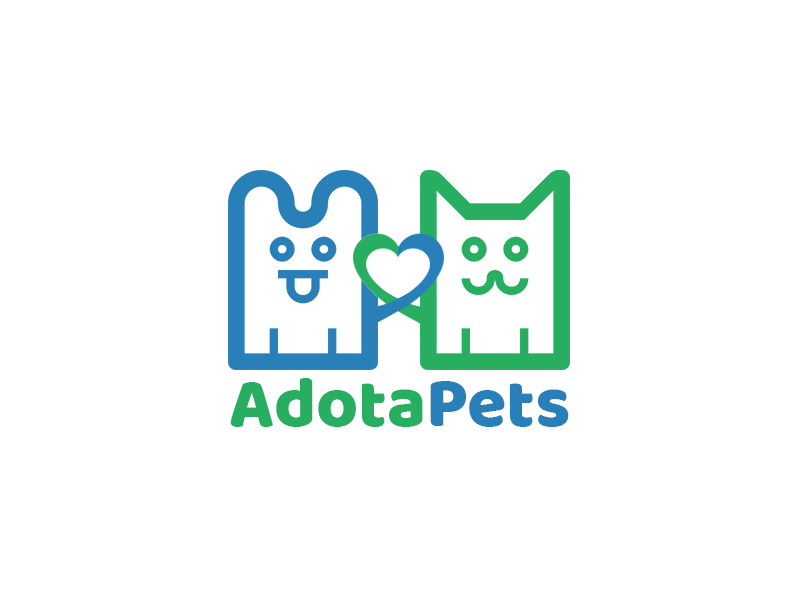
<style>
.page{position:relative;width:800px;height:600px;background:#ffffff}
.page>*{position:absolute;margin:0}
.t1{font:72px "Baloo-Regular";color:#27ae60}
.t2{font:72px "Baloo-Regular";color:#2980b9}
</style>
<div class="page">
<p class="t1" style="left:230px;top:378px;width:339px;height:49px">Adota<span class="t2">Pets</span></p>
</div>
